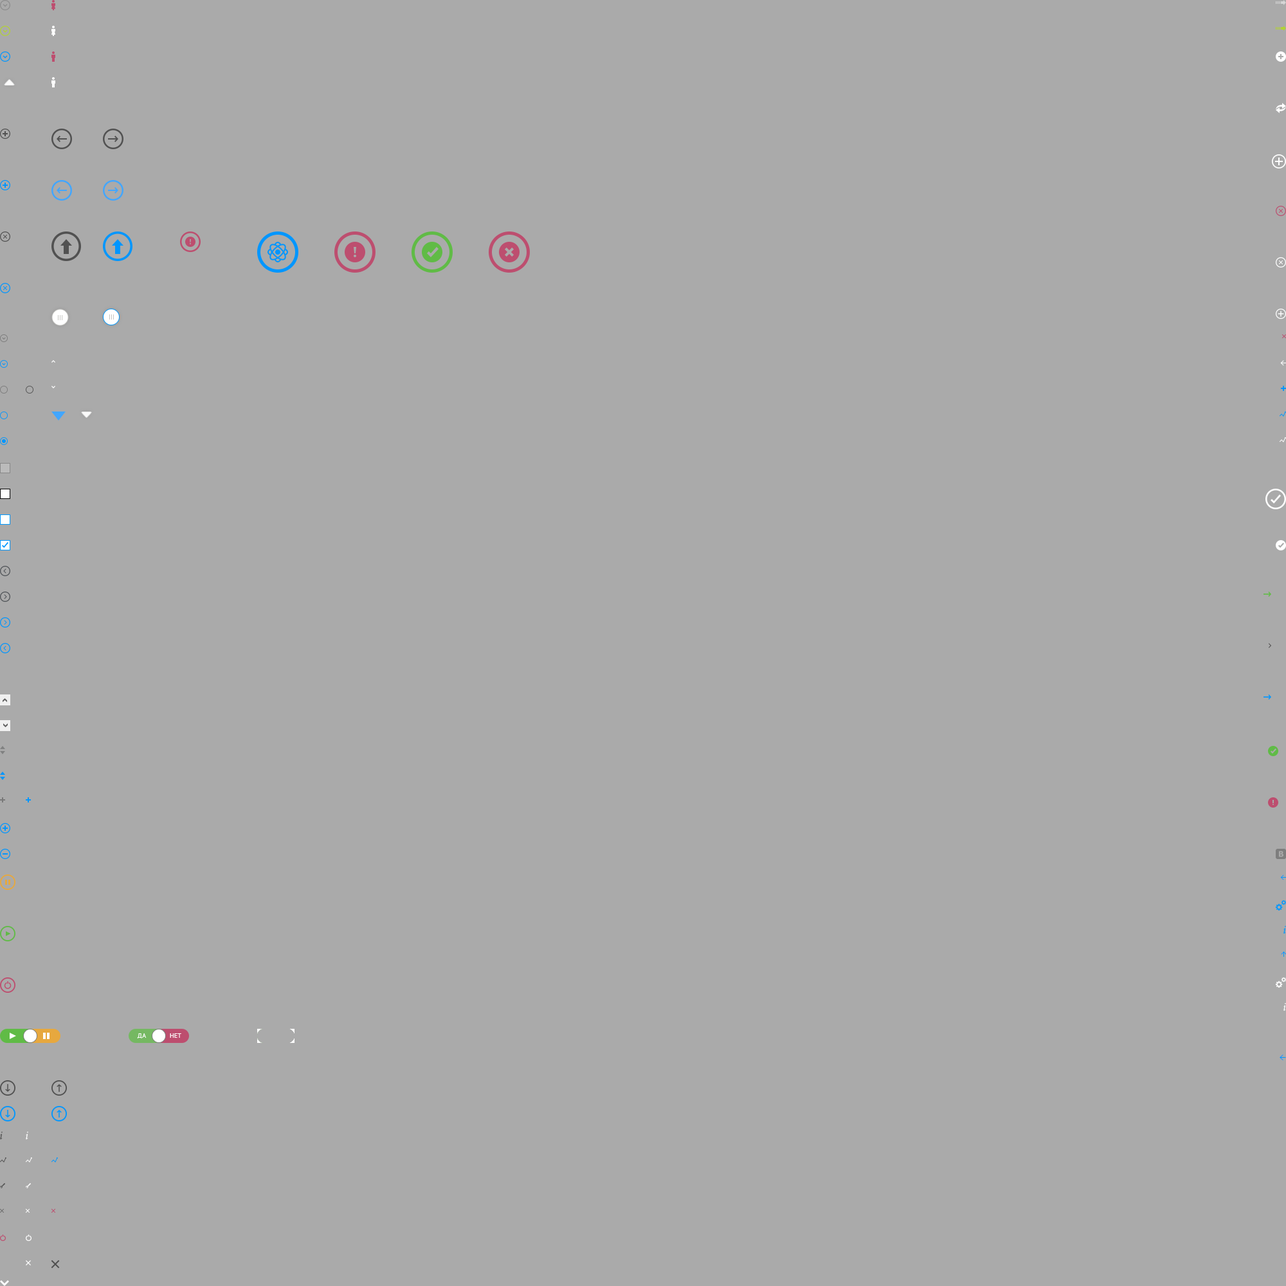
<style>
.page{position:relative;width:1286px;height:1286px;background:#aaaaaa}
.page>*{position:absolute;margin:0}
.t1{font:9px "MinionPro-Regular";color:#ffffff;text-transform:uppercase}
.t2{font:9px "MinionPro-Regular";color:#0096ff;text-transform:uppercase}
.t3{font:9.2px "MinionPro-Regular";color:#0096ff;text-transform:uppercase;scale:0.96 1}
.t4{font:6.4px "PTSans-Regular";color:#ffffff;text-transform:uppercase}
.t5{font:10.3px "MinionPro-Regular";color:#0096ff}
</style>
<div class="page">
<p class="t1" style="left:1280px;top:360px;width:6px;height:6px">←</p>
<p class="t2" style="left:1280px;top:874px;width:6px;height:6px">←</p>
<p class="t3" style="left:1281px;top:951px;width:5px;height:6px;rotate:-90deg">→</p>
<p class="t4" style="left:137px;top:1033px;width:10px;height:5px">да</p>
<p class="t4" style="left:170px;top:1033px;width:11px;height:5px">Нет</p>
<p class="t5" style="left:1279px;top:1054px;width:7px;height:6px">←</p>
</div>
